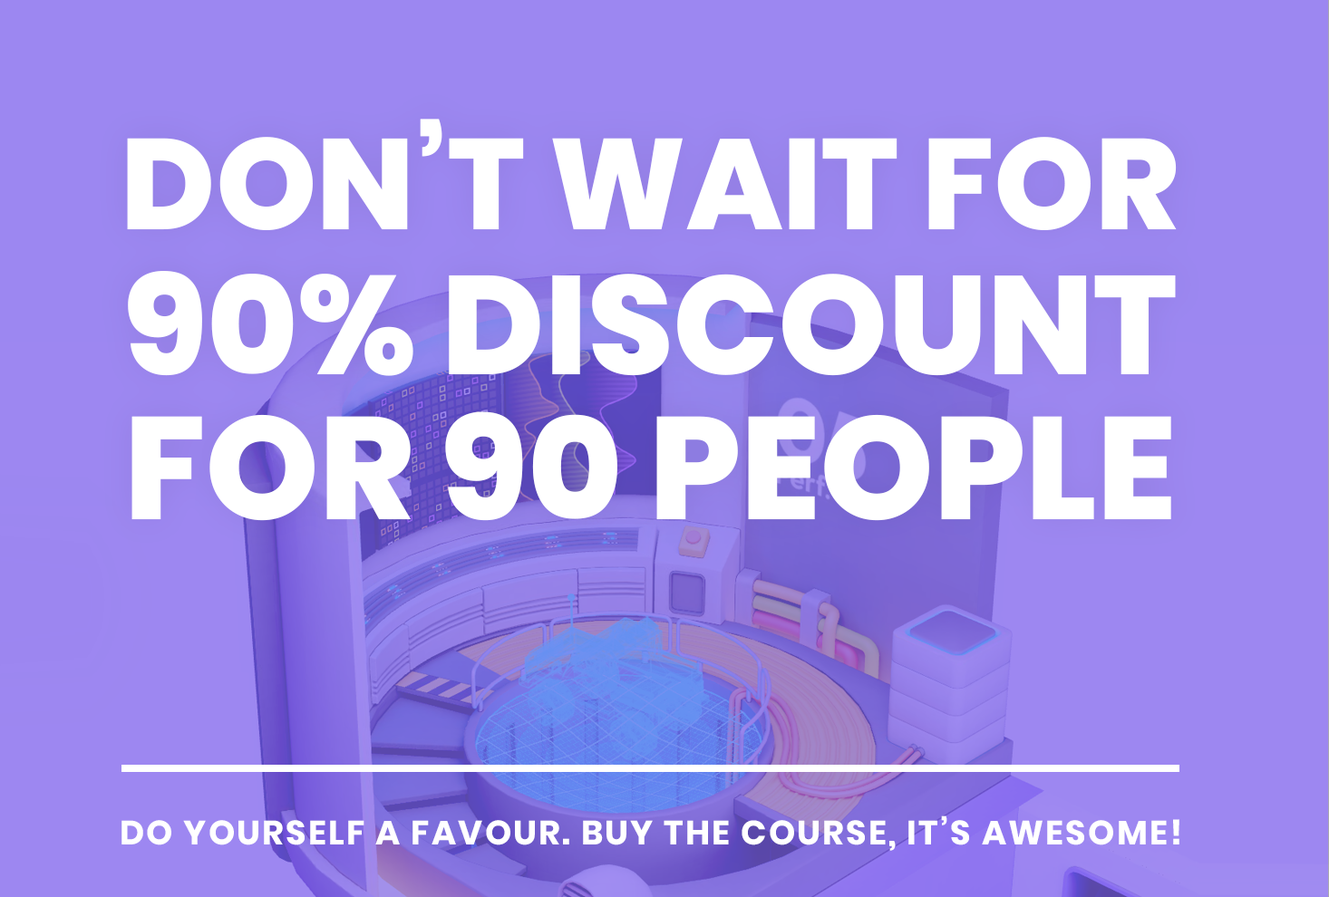
<style>
.page{position:relative;width:1329px;height:897px}
.page>*{position:absolute;margin:0}
.t1{font:128.3px/145px "Poppins-ExtraBold";color:#ffffff;text-transform:uppercase}
.t2{font:139.6px/145px "Poppins-ExtraBold";color:#ffffff;text-transform:uppercase}
.t3{font:145px/145px "Poppins-ExtraBold";color:#ffffff;text-transform:uppercase}
.t4{font:33.7px "Poppins-Bold";letter-spacing:0.06em;color:#ffffff;text-transform:uppercase}
</style>
<div class="page">
<p class="t1" style="left:127px;top:119px;width:1050px;height:402px;text-align:center">Don’t wait for<br><span class="t2">90% discount<br></span><span class="t3">for 90 people</span></p>
<p class="t4" style="left:121px;top:816px;width:1058px;height:35px">Do yourself a favour. Buy the course, it’s awesome!</p>
</div>
